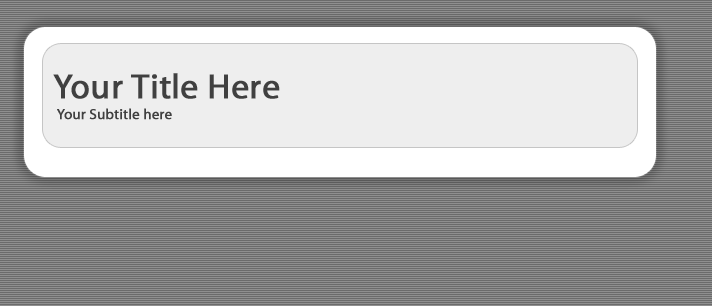
<style>
.page{position:relative;width:712px;height:306px;background:#eeeeee}
.page>*{position:absolute;margin:0}
.t1{font:14.5px/21px "Myriad-Roman";color:#404040;font-weight:bold}
.t2{font:34.9px/21px "Myriad-Roman";color:#404040;font-weight:bold}
</style>
<div class="page">
<p class="t1" style="left:53px;top:73px;width:227px;height:47px"><span class="t2">Your Title Here<br> </span>Your Subtitle here</p>
</div>
